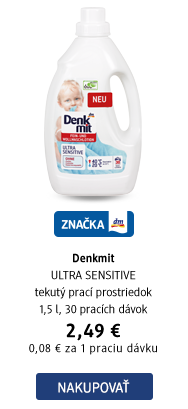
<style>
.page{position:relative;width:188px;height:409px;background:#ffffff}
.page>*{position:absolute;margin:0}
.t1{font:12px/17px "DMBrand-Regular";color:#000000}
.t2{font:12px/17px "DMBrand-Bold";color:#000000}
.t3{font:20px "DMBrand-Bold";letter-spacing:0.04em;color:#000000}
.t4{font:12px/15px "DMBrand-Regular";letter-spacing:0.04em;color:#000000}
.t5{font:14px "DMBrand-Regular";letter-spacing:0.025em;color:#ffffff;text-transform:uppercase}
</style>
<div class="page">
<p class="t1" style="left:29px;top:253px;width:128px;height:102px;text-align:center"><span class="t2">Denkmit <br></span>ULTRA SENSITIVE<br>tekutý prací prostriedok<br>1,5 l, 30 pracích dávok<br><span class="t3">2,49 €<br></span><span class="t4">0,08 € za 1 praciu dávku</span></p>
<p class="t5" style="left:58px;top:379px;width:72px;height:14px">Nakupovať</p>
</div>
